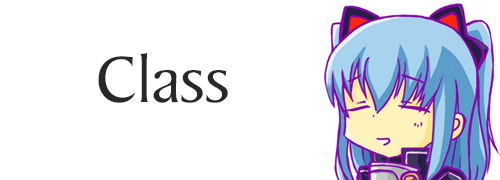
<style>
.page{position:relative;width:500px;height:180px;background:#ffffff}
.page>*{position:absolute;margin:0}
.t1{font:70px "BakerSignetBT-Roman";color:#282828}
</style>
<div class="page">
<p class="t1" style="left:98px;top:53px;width:130px;height:50px">Class</p>
</div>
